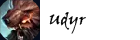
<style>
.page{position:relative;width:140px;height:40px;background:#ffffff}
.page>*{position:absolute;margin:0}
.t1{font:16px "VinerHandITC";color:#000000}
</style>
<div class="page">
<p class="t1" style="left:49px;top:12px;width:37px;height:22px">Udyr</p>
</div>
